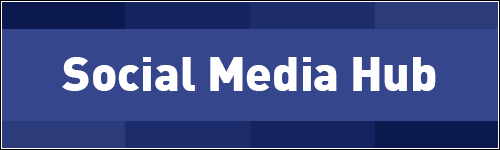
<style>
.page{position:relative;width:500px;height:150px;background:#36468c}
.page>*{position:absolute;margin:0}
.t1{font:48px "DIN-Black";color:#ffffff}
</style>
<div class="page">
<p class="t1" style="left:62px;top:57px;width:374px;height:34px">Social Media Hub</p>
</div>
